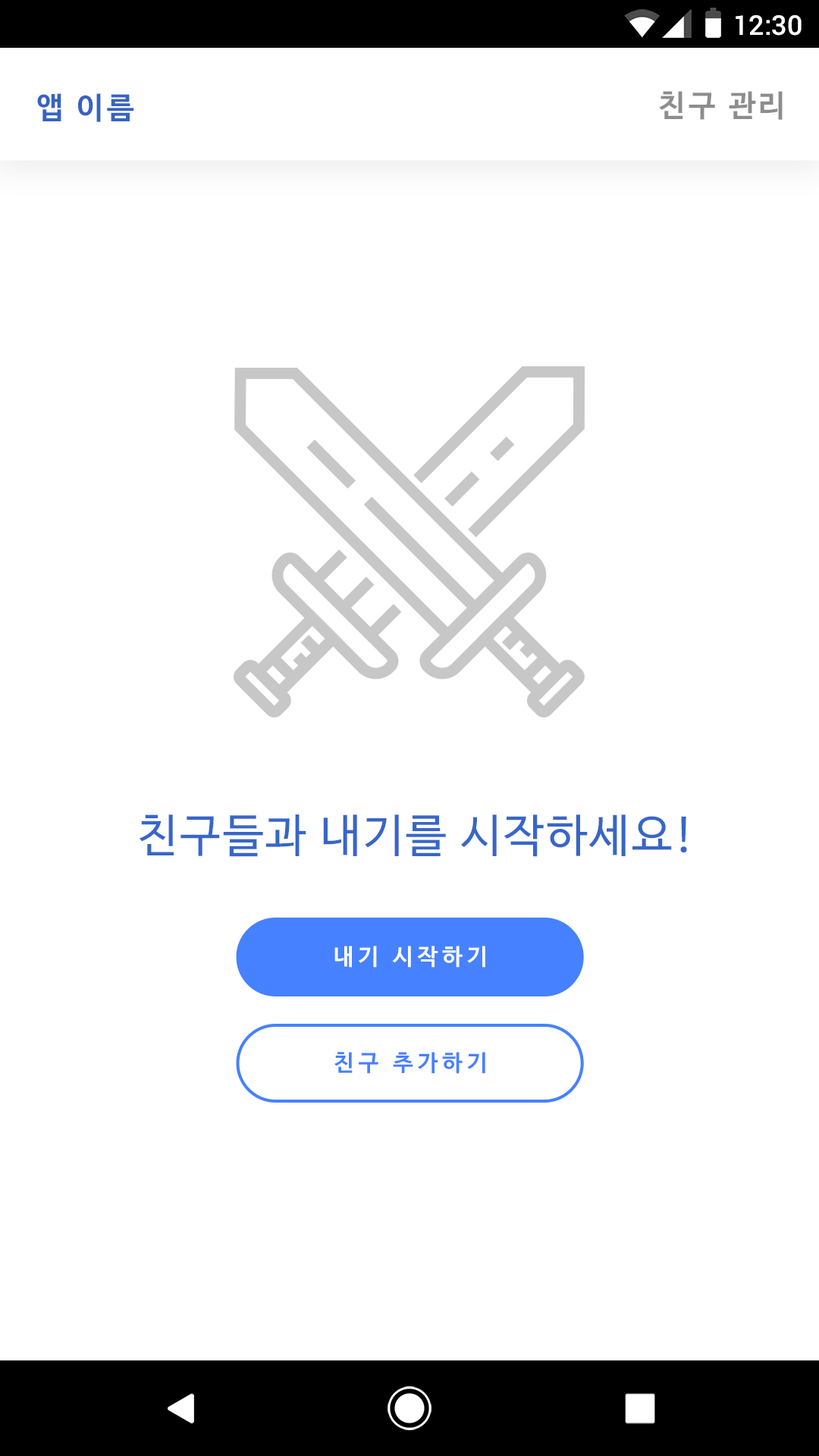
<style>
.page{position:relative;width:819px;height:1456px;background:#ffffff}
.page>*{position:absolute;margin:0}
.t1{font:27.3px "Roboto-Medium";color:#ffffff}
.t2{font:30.3px "NanumBarunGothicBold";letter-spacing:0.1em;color:#3663c3}
.t3{font:30.3px "NanumBarunGothicBold";letter-spacing:0.1em;color:#8d8d8d}
.t4{font:45.5px "NanumBarunGothic";letter-spacing:0.05em;color:#3766c9}
.t5{font:22.7px "NanumBarunGothicBold";letter-spacing:0.2em;color:#ffffff}
.t6{font:22.7px "NanumBarunGothicBold";letter-spacing:0.2em;color:#4681ff}
</style>
<div class="page">
<p class="t1" style="left:736px;top:15px;width:66px;height:21px">12:30</p>
<p class="t2" style="left:37px;top:93px;width:97px;height:29px">앱 이름</p>
<p class="t3" style="left:659px;top:91px;width:124px;height:29px">친구 관리</p>
<p class="t4" style="left:140px;top:814px;width:547px;height:43px">친구들과 내기를 시작하세요!</p>
<p class="t5" style="left:334px;top:946px;width:151px;height:22px">내기 시작하기</p>
<p class="t6" style="left:334px;top:1052px;width:151px;height:22px">친구 추가하기</p>
</div>
